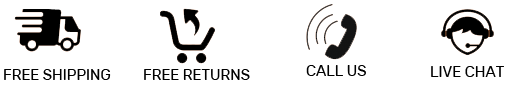
<style>
.page{position:relative;width:513px;height:91px;background:#ffffff}
.page>*{position:absolute;margin:0}
.t1{font:15px "Rubik-Regular";color:#000000}
</style>
<div class="page">
<p class="t1" style="left:306px;top:65px;width:60px;height:11px">CALL US</p>
<p class="t1" style="left:4px;top:69px;width:107px;height:11px">FREE SHIPPING</p>
<p class="t1" style="left:144px;top:69px;width:106px;height:11px">FREE RETURNS</p>
<p class="t1" style="left:431px;top:66px;width:73px;height:11px">LIVE CHAT</p>
</div>
